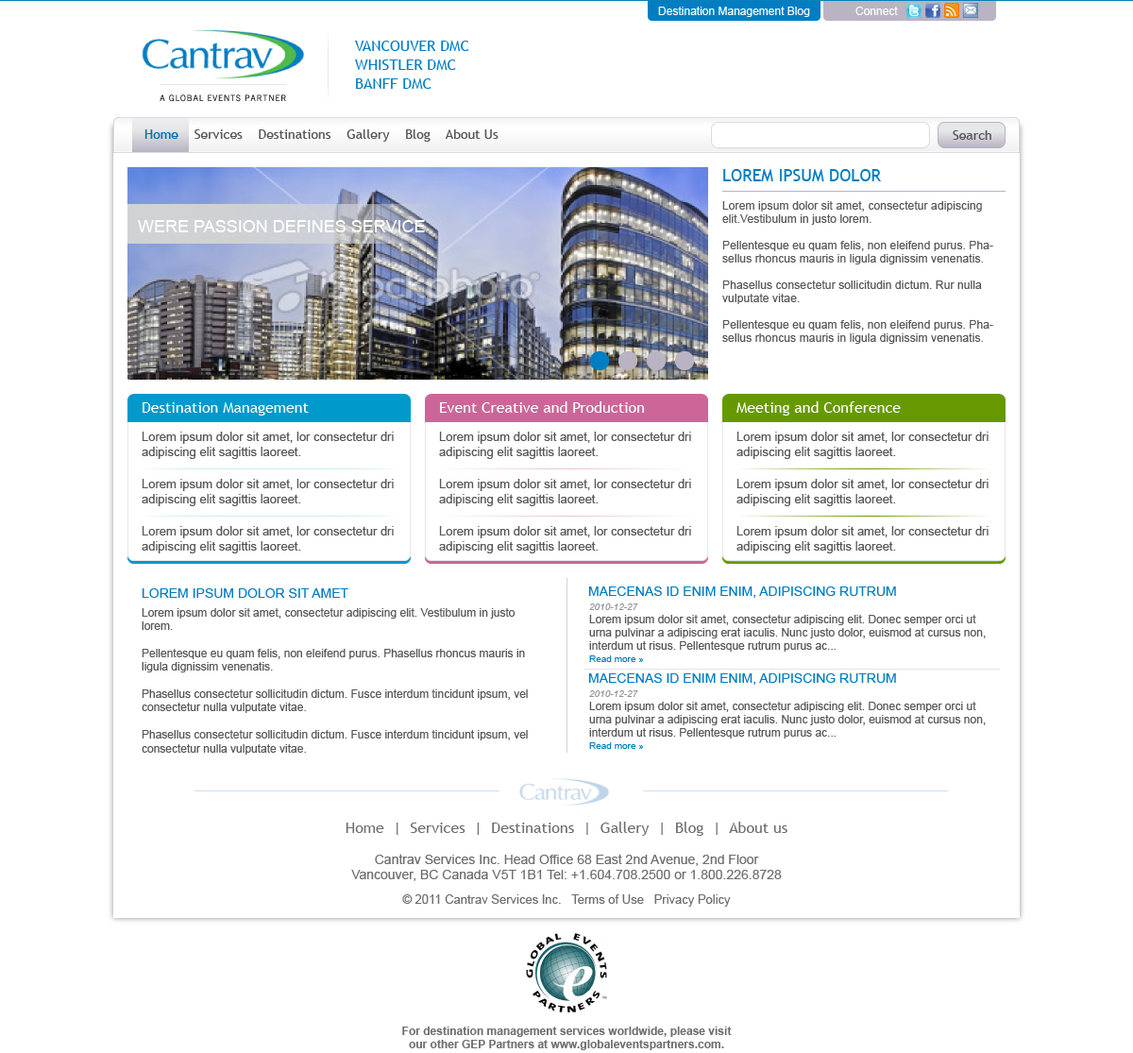
<style>
.page{position:relative;width:1133px;height:1053px;background:#ffffff}
.page>*{position:absolute;margin:0}
.t1{font:11.3px "ArialMT";color:#ffffff}
.t2{font:15.1px/18.9px "TrebuchetMS";color:#007dc3;text-transform:uppercase}
.t3{font:13.2px "TrebuchetMS";color:#58585a}
.t4{font:13.2px "TrebuchetMS";color:#0471b0}
.t5{font:17px "TrebuchetMS";color:#007dc3;text-transform:uppercase}
.t6{font:11.3px/13.2px "ArialMT";color:#58585a}
.t7{font:17px "ArialMT";color:#ffffff;text-transform:uppercase}
.t8{font:15.1px "TrebuchetMS";color:#ffffff}
.t9{font:12.3px/15.1px "ArialMT";color:#58585a}
.t10{font:13.2px "ArialMT";color:#007dc3;text-transform:uppercase}
.t11{font:9.4px "Arial-ItalicMT";color:#929497}
.t12{font:11.3px "ArialMT";color:#58585a}
.t13{font:9.4px "ArialMT";color:#0980b8}
.t14{font:15.1px "TrebuchetMS";color:#6d6e70}
.t15{font:13.2px/15.1px "ArialMT";color:#6d6e70}
.t16{font:12.3px "ArialMT";color:#6d6e70}
.t17{font:11.3px/13.2px "Arial-BoldMT";color:#6d6e70}
</style>
<div class="page">
<p class="t1" style="left:658px;top:7px;width:152px;height:10px">Destination Management Blog</p>
<p class="t1" style="left:855px;top:7px;width:43px;height:8px">Connect</p>
<p class="t2" style="left:355px;top:41px;width:114px;height:48px">Vancouver DMC<br>Whistler DMC<br>Banff DMC</p>
<p class="t3" style="left:144px;top:129px;width:354px;height:13px"><span class="t4">Home    </span>Services    Destinations    Gallery    Blog    About Us</p>
<p class="t3" style="left:953px;top:130px;width:38px;height:10px">Search</p>
<p class="t5" style="left:723px;top:169px;width:158px;height:12px">Lorem ipsum dolor</p>
<p class="t6" style="left:722px;top:201px;width:271px;height:143px">Lorem ipsum dolor sit amet, consectetur adipiscing elit.Vestibulum in justo lorem.<br><br>Pellentesque eu quam felis, non eleifend purus. Phasellus rhoncus mauris in ligula dignissim venenatis. <br><br>Phasellus consectetur sollicitudin dictum. Rur nulla vulputate vitae.<br><br>Pellentesque eu quam felis, non eleifend purus. Phasellus rhoncus mauris in ligula dignissim venenatis.</p>
<p class="t7" style="left:138px;top:220px;width:287px;height:12px">Were Passion Defines Service</p>
<p class="t8" style="left:440px;top:401px;width:205px;height:12px">Event Creative and Production</p>
<p class="t8" style="left:736px;top:401px;width:165px;height:14px">Meeting and Conference</p>
<p class="t8" style="left:143px;top:402px;width:166px;height:13px">Destination Management</p>
<p class="t9" style="left:142px;top:431px;width:252px;height:28px">Lorem ipsum dolor sit amet, lor consectetur dri adipiscing elit sagittis laoreet.</p>
<p class="t9" style="left:439px;top:431px;width:252px;height:28px">Lorem ipsum dolor sit amet, lor consectetur dri adipiscing elit sagittis laoreet.</p>
<p class="t9" style="left:736px;top:431px;width:252px;height:28px">Lorem ipsum dolor sit amet, lor consectetur dri adipiscing elit sagittis laoreet.</p>
<p class="t9" style="left:142px;top:479px;width:252px;height:27px">Lorem ipsum dolor sit amet, lor consectetur dri adipiscing elit sagittis laoreet.</p>
<p class="t9" style="left:439px;top:479px;width:252px;height:27px">Lorem ipsum dolor sit amet, lor consectetur dri adipiscing elit sagittis laoreet.</p>
<p class="t9" style="left:736px;top:479px;width:252px;height:27px">Lorem ipsum dolor sit amet, lor consectetur dri adipiscing elit sagittis laoreet.</p>
<p class="t9" style="left:142px;top:526px;width:252px;height:27px">Lorem ipsum dolor sit amet, lor consectetur dri adipiscing elit sagittis laoreet.</p>
<p class="t9" style="left:439px;top:526px;width:252px;height:27px">Lorem ipsum dolor sit amet, lor consectetur dri adipiscing elit sagittis laoreet.</p>
<p class="t9" style="left:736px;top:526px;width:252px;height:27px">Lorem ipsum dolor sit amet, lor consectetur dri adipiscing elit sagittis laoreet.</p>
<p class="t10" style="left:142px;top:588px;width:206px;height:10px">Lorem ipsum dolor sit amet</p>
<p class="t10" style="left:588px;top:586px;width:308px;height:12px">Maecenas id enim enim, adipiscing rutrum</p>
<p class="t11" style="left:589px;top:603px;width:49px;height:7px">2010-12-27</p>
<p class="t12" style="left:142px;top:608px;width:386px;height:146px">Lorem ipsum dolor sit amet, consectetur adipiscing elit. Vestibulum in justo lorem.<br><br>Pellentesque eu quam felis, non eleifend purus. Phasellus rhoncus mauris in ligula dignissim venenatis. <br><br>Phasellus consectetur sollicitudin dictum. Fusce interdum tincidunt ipsum, vel consectetur nulla vulputate vitae. <br><br>Phasellus consectetur sollicitudin dictum. Fusce interdum tincidunt ipsum, vel consectetur nulla vulputate vitae.</p>
<p class="t6" style="left:589px;top:615px;width:397px;height:36px">Lorem ipsum dolor sit amet, consectetur adipiscing elit. Donec semper orci ut urna pulvinar a adipiscing erat iaculis. Nunc justo dolor, euismod at cursus non, interdum ut risus. Pellentesque rutrum purus ac...</p>
<p class="t13" style="left:589px;top:655px;width:55px;height:7px">Read more »</p>
<p class="t10" style="left:588px;top:673px;width:308px;height:11px">Maecenas id enim enim, adipiscing rutrum</p>
<p class="t6" style="left:589px;top:701px;width:397px;height:37px">Lorem ipsum dolor sit amet, consectetur adipiscing elit. Donec semper orci ut urna pulvinar a adipiscing erat iaculis. Nunc justo dolor, euismod at cursus non, interdum ut risus. Pellentesque rutrum purus ac...</p>
<p class="t11" style="left:589px;top:690px;width:49px;height:7px">2010-12-27</p>
<p class="t13" style="left:589px;top:742px;width:55px;height:7px">Read more »</p>
<p class="t14" style="left:346px;top:821px;width:441px;height:14px">Home  |  Services  |  Destinations  |  Gallery  |  Blog  |  About us</p>
<p class="t15" style="left:351px;top:853px;width:431px;height:28px;text-align:center">Cantrav Services Inc. Head Office 68 East 2nd Avenue, 2nd Floor<br>Vancouver, BC Canada V5T 1B1 Tel: +1.604.708.2500 or 1.800.226.8728</p>
<p class="t16" style="left:402px;top:894px;width:329px;height:12px">© 2011 Cantrav Services Inc.   Terms of Use   Privacy Policy</p>
<p class="t17" style="left:402px;top:1026px;width:330px;height:24px;text-align:center">For destination management services worldwide, please visit<br>our other GEP Partners at www.globaleventspartners.com.</p>
</div>
